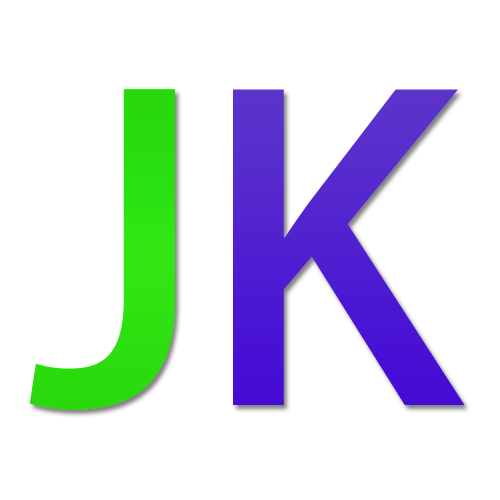
<style>
.page{position:relative;width:500px;height:500px;background:#ffffff}
.page>*{position:absolute;margin:0}
.t1{font:412.2px "AdobeHeitiStd-Regular";color:#2ade0f;scale:1.07 1}
.t2{font:412.2px "AdobeHeitiStd-Regular";color:#512ac0;scale:1.07 1}
</style>
<div class="page">
<p class="t1" style="left:29px;top:89px;width:146px;height:321px">J</p>
<p class="t2" style="left:233px;top:89px;width:232px;height:316px">K</p>
</div>
